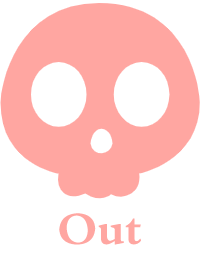
<style>
.page{position:relative;width:200px;height:260px;background:#ffffff}
.page>*{position:absolute;margin:0}
.t1{font:48px "2.0-";color:#ffa6a1}
</style>
<div class="page">
<p class="t1" style="left:59px;top:213px;width:82px;height:32px">Out</p>
</div>
